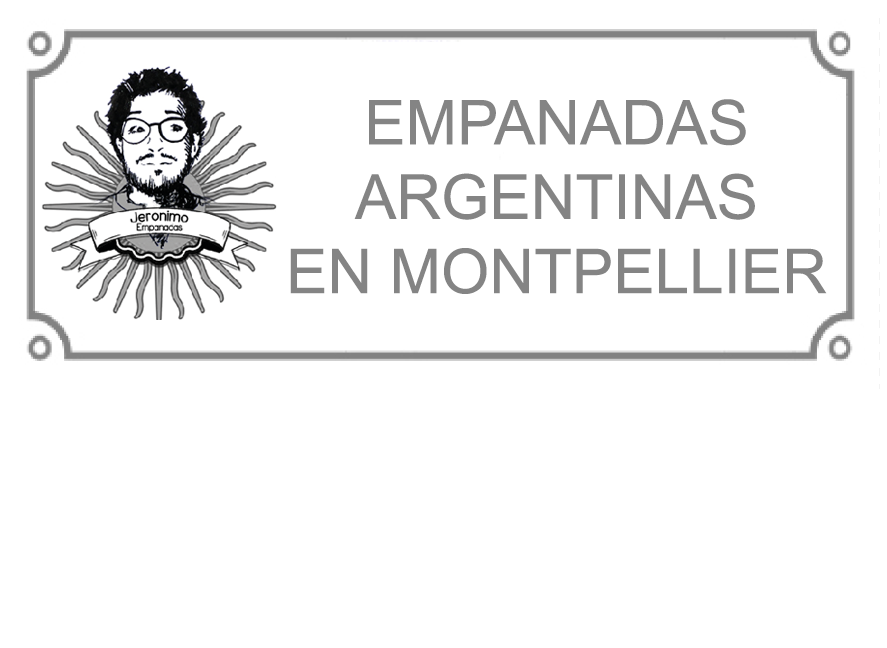
<style>
.page{position:relative;width:887px;height:648px;background:#ffffff}
.page>*{position:absolute;margin:0}
.t1{font:62px "ArialMT";color:#848484}
</style>
<div class="page">
<p class="t1" style="left:290px;top:99px;width:537px;height:195px;text-align:center">EMPANADAS<br>ARGENTINAS<br>EN MONTPELLIER</p>
</div>
